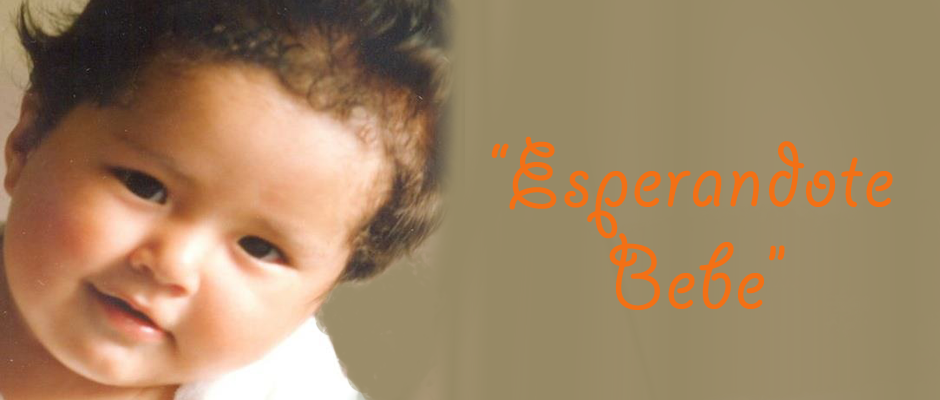
<style>
.page{position:relative;width:940px;height:400px}
.page>*{position:absolute;margin:0}
.t1{font:100.8px/102px "GiddyupStd";color:#f37015;font-weight:bold}
</style>
<div class="page">
<p class="t1" style="left:491px;top:136px;width:402px;height:174px;text-align:center">“Esperandote Bebe”</p>
</div>
